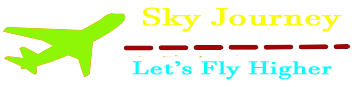
<style>
.page{position:relative;width:355px;height:87px;background:#ffffff}
.page>*{position:absolute;margin:0}
.t1{font:24px "JavaneseText";color:#f9fc09;font-weight:bold;scale:1.49 1}
.t2{font:18px "JavaneseText";color:#09f9fc;font-weight:bold;scale:1.49 1}
</style>
<div class="page">
<p class="t1" style="left:143px;top:7px;width:199px;height:25px">Sky Journey</p>
<p class="t2" style="left:132px;top:61px;width:200px;height:19px">Let’s Fly Higher</p>
</div>
